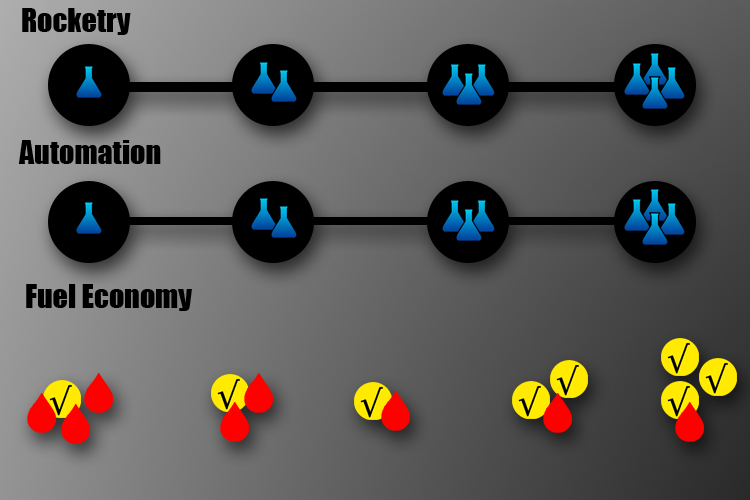
<style>
.page{position:relative;width:750px;height:500px}
.page>*{position:absolute;margin:0}
.t1{font:30px "Impact";color:#000000}
</style>
<div class="page">
<p class="t1" style="left:22px;top:8px;width:109px;height:27px">Rocketry</p>
<p class="t1" style="left:18px;top:140px;width:143px;height:24px">Automation</p>
<p class="t1" style="left:26px;top:284px;width:166px;height:27px">Fuel Economy</p>
</div>
